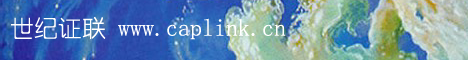
<style>
.page{position:relative;width:468px;height:60px}
.page>*{position:absolute;margin:0}
.t1{font:24px "YouYuan";color:#ffffff}
</style>
<div class="page">
<p class="t1" style="left:11px;top:16px;width:275px;height:24px">世纪证联 www.caplink.cn</p>
</div>
